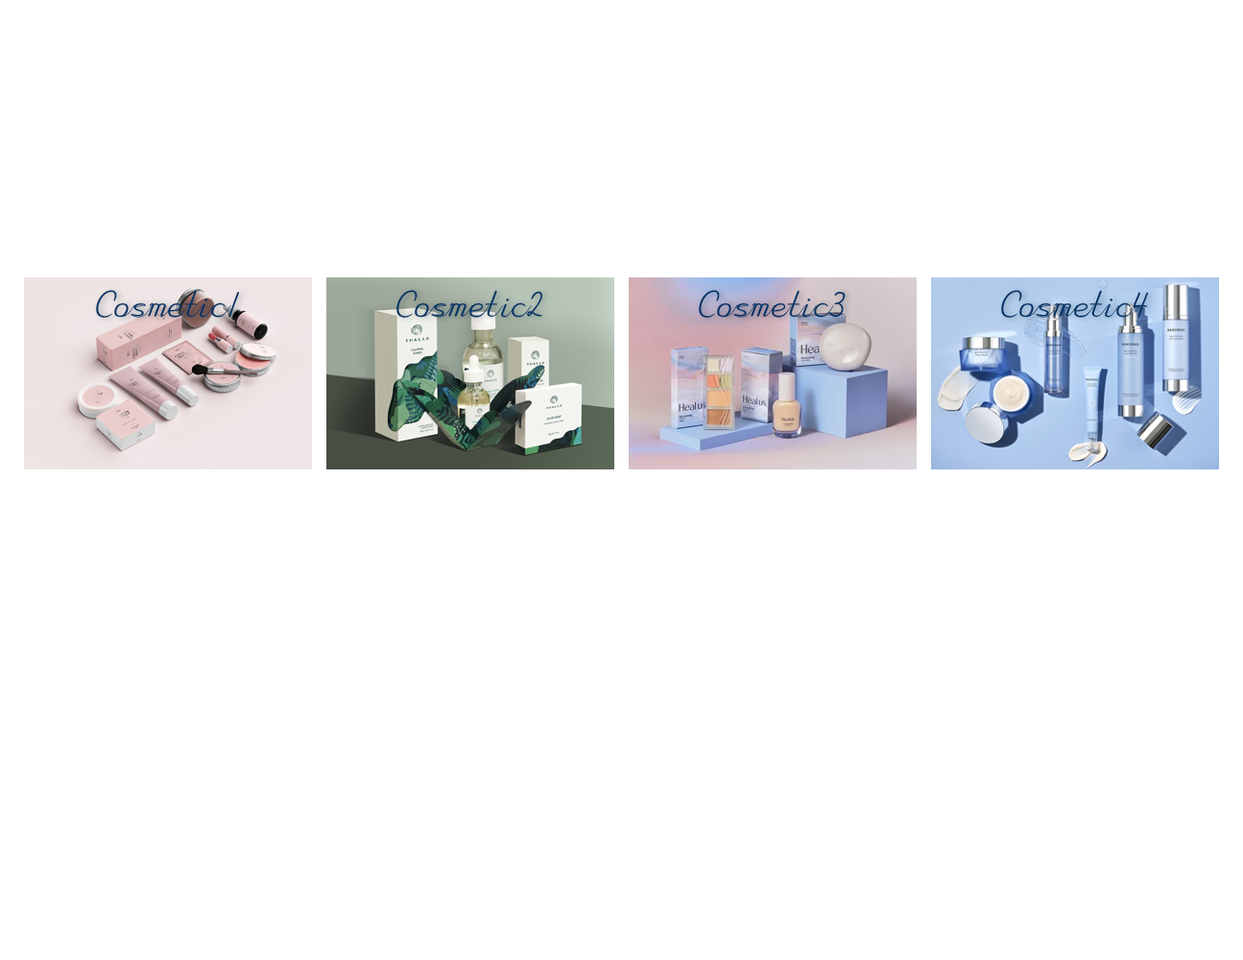
<style>
.page{position:relative;width:1243px;height:960px;background:#ffffff}
.page>*{position:absolute;margin:0}
.t1{font:34.5px "Continuous";letter-spacing:0.04em;color:#003366}
</style>
<div class="page">
<p class="t1" style="left:96px;top:290px;width:143px;height:28px">Cosmetic1</p>
<p class="t1" style="left:396px;top:290px;width:147px;height:28px">Cosmetic2</p>
<p class="t1" style="left:699px;top:290px;width:146px;height:28px">Cosmetic3</p>
<p class="t1" style="left:1001px;top:290px;width:148px;height:28px">Cosmetic4</p>
</div>
